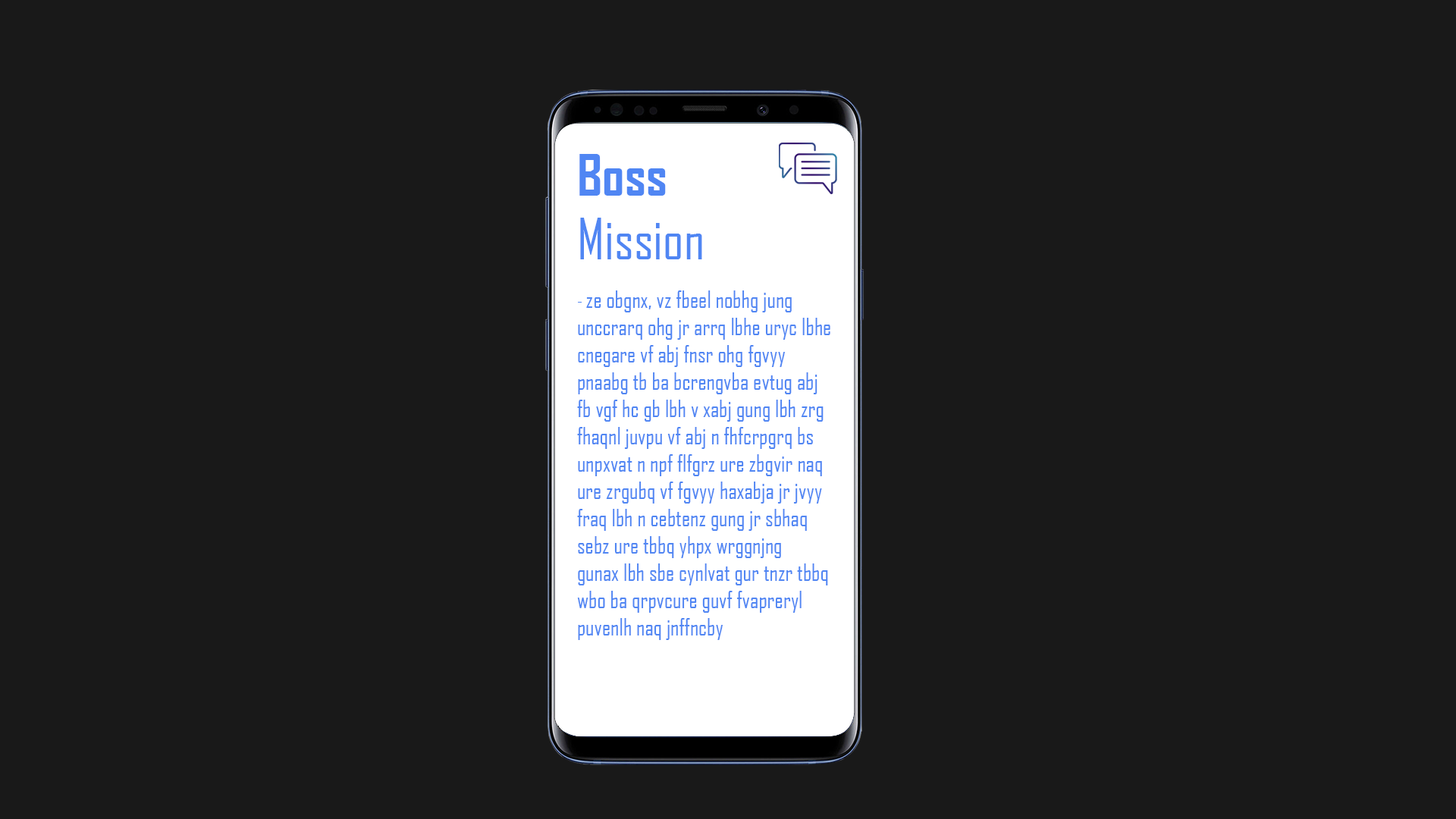
<style>
.page{position:relative;width:1456px;height:819px;background:#191919}
.page>*{position:absolute;margin:0}
.t1{font:54.6px "AgencyFB-Bold";color:#5086f3}
.t2{font:22.7px "AgencyFB-Reg";color:#5086f3}
.t3{font:54.6px "AgencyFB-Reg";color:#5086f3}
.t4{font:18.2px "AgencyFB-Reg";color:#5086f3}
</style>
<div class="page">
<p class="t1" style="left:579px;top:154px;width:87px;height:42px">Boss</p>
<p class="t2" style="left:577px;top:218px;width:253px;height:422px"><span class="t3">Mission<br></span><span class="t4"><br>- </span>ze obgnx, vz fbeel nobhg jung unccrarq ohg jr arrq lbhe uryc lbhe cnegare vf abj fnsr ohg fgvyy pnaabg tb ba bcrengvba evtug abj<br>fb vgf hc gb lbh v xabj gung lbh zrg fhaqnl juvpu vf abj n fhfcrpgrq bs unpxvat n npf flfgrz ure zbgvir naq ure zrgubq vf fgvyy haxabja jr jvyy fraq lbh n cebtenz gung jr sbhaq sebz ure tbbq yhpx wrggnjng<br>gunax lbh sbe cynlvat gur tnzr tbbq wbo ba qrpvcure guvf fvapreryl puvenlh naq jnffncby</p>
</div>
